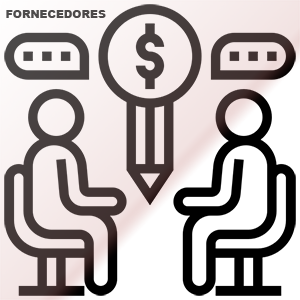
<style>
.page{position:relative;width:300px;height:300px}
.page>*{position:absolute;margin:0}
.t1{font:10.9px "Arial-Black";color:#4e4b4b}
</style>
<div class="page">
<p class="t1" style="left:6px;top:10px;width:100px;height:8px">FORNECEDORES</p>
</div>
